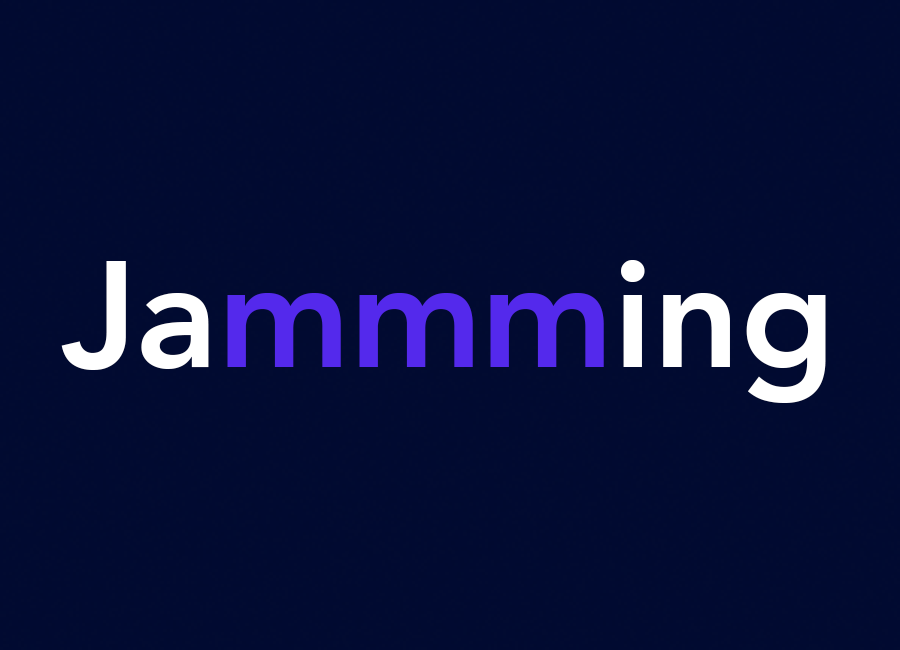
<style>
.page{position:relative;width:900px;height:650px;background:#010a31}
.page>*{position:absolute;margin:0}
.t1{font:150.5px "Avenir-Heavy";color:#5429ec}
.t2{font:150.5px "Avenir-Heavy";color:#ffffff}
</style>
<div class="page">
<p class="t1" style="left:61px;top:260px;width:765px;height:143px"><span class="t2">Ja</span>mmm<span class="t2">ing</span></p>
</div>
